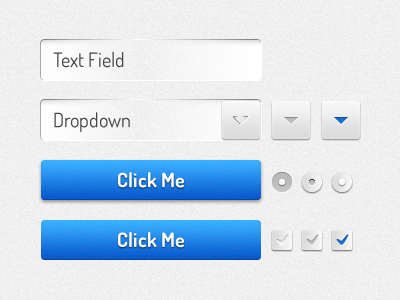
<style>
.page{position:relative;width:400px;height:300px}
.page>*{position:absolute;margin:0}
.t1{font:20px "Dosis-Regular";color:#444444}
.t2{font:20px "Dosis-Bold";color:#ffffff}
</style>
<div class="page">
<p class="t1" style="left:53px;top:51px;width:71px;height:17px">Text Field</p>
<p class="t1" style="left:54px;top:112px;width:76px;height:20px">Dropdown</p>
<p class="t2" style="left:118px;top:172px;width:66px;height:16px">Click Me</p>
<p class="t2" style="left:118px;top:232px;width:66px;height:16px">Click Me</p>
</div>
